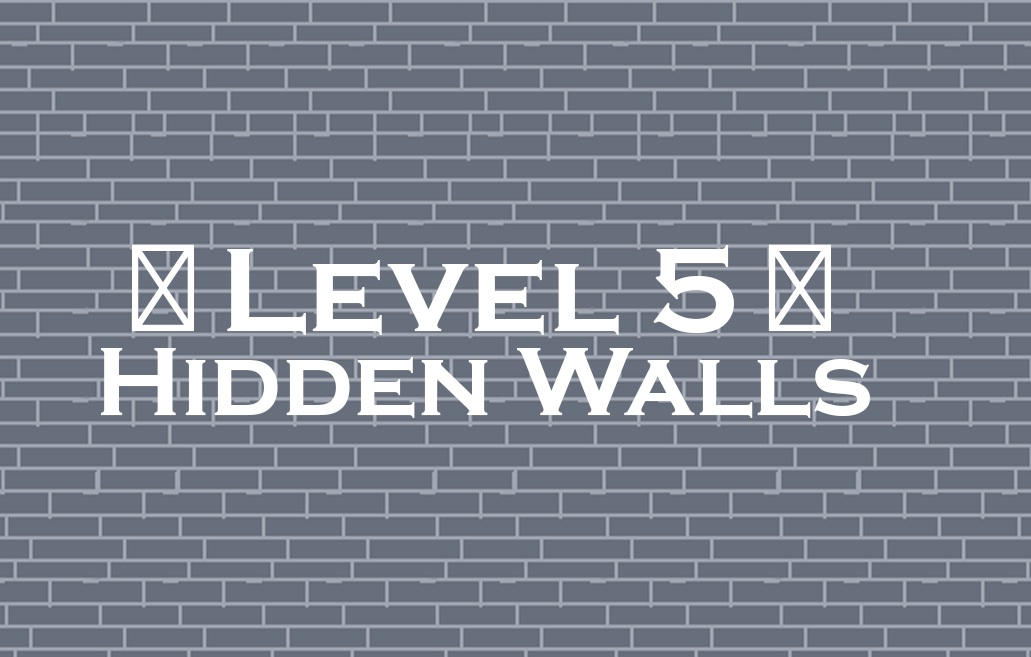
<style>
.page{position:relative;width:1031px;height:657px;background:#686f7c}
.page>*{position:absolute;margin:0}
.t1{font:123.4px "CopperplateGothic-Bold";color:#ffffff}
.t2{font:123.4px "MyriadPro-Regular";color:#ffffff}
.t3{font:101px "CopperplateGothic-Bold";color:#ffffff}
</style>
<div class="page">
<p class="t1" style="left:132px;top:244px;width:699px;height:91px"><span class="t2">ᆞ </span>Level 5 <span class="t2">ᆞ</span></p>
<p class="t3" style="left:101px;top:348px;width:769px;height:70px">Hidden Walls</p>
</div>
